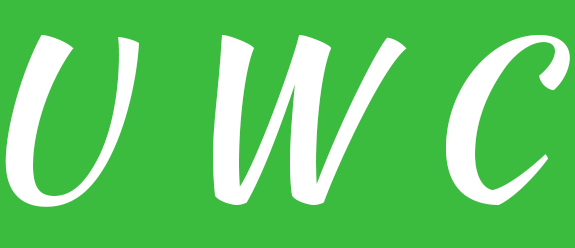
<style>
.page{position:relative;width:575px;height:248px;background:#3cbc3e}
.page>*{position:absolute;margin:0}
.t1{font:209px "KaushanScript-Regular";color:#ffffff}
</style>
<div class="page">
<p class="t1" style="left:5px;top:35px;width:565px;height:172px">U W C</p>
</div>
